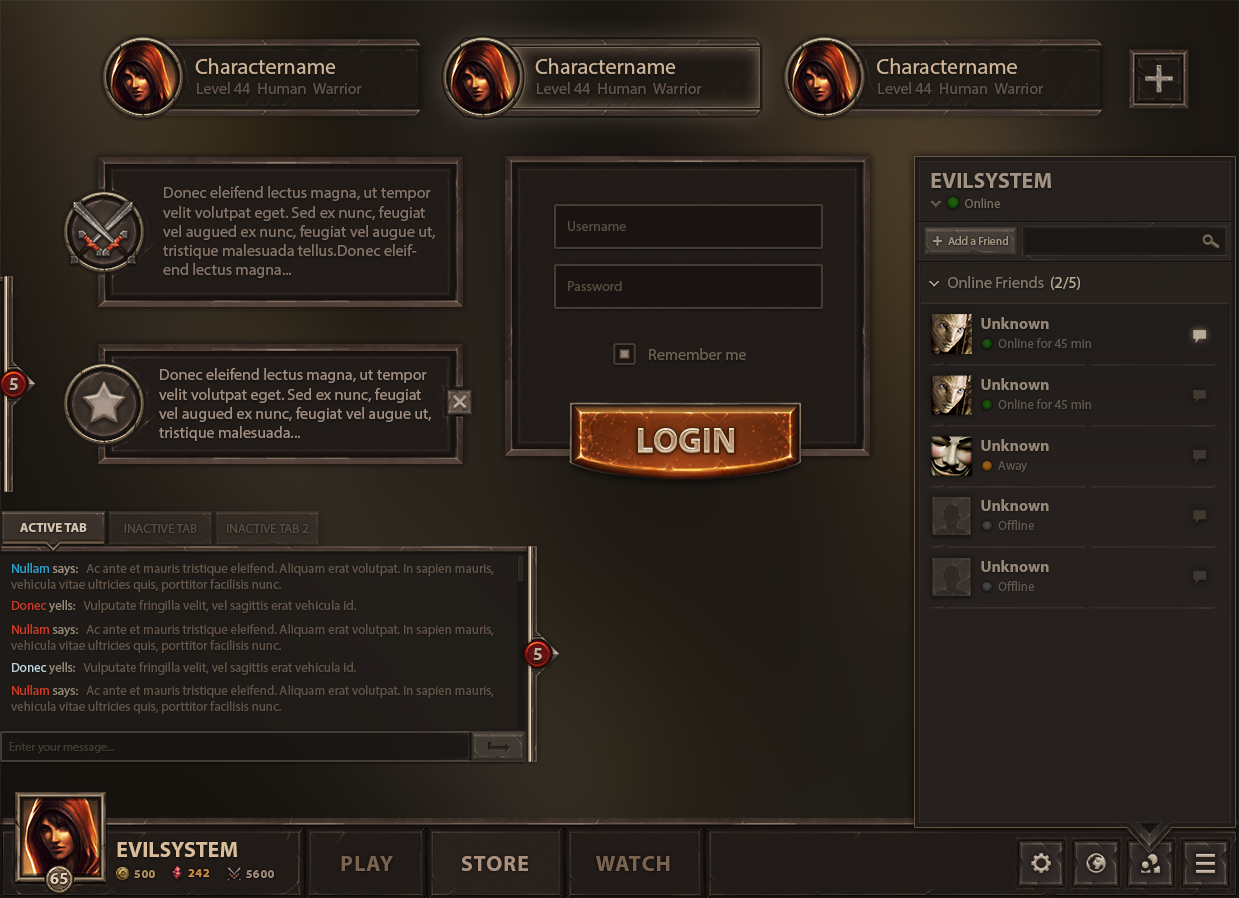
<style>
.page{position:relative;width:1239px;height:898px}
.page>*{position:absolute;margin:0}
.t1{font:22px "MyriadPro-Regular";color:#cfb598}
.t2{font:16px "MyriadPro-Regular";color:#615248}
.t3{font:22px "MyriadPro-Bold";color:#a29482;text-transform:uppercase}
.t4{font:16px "MyriadPro-Regular";color:#847468}
.t5{font:13px "MyriadPro-Regular";color:#756c61}
.t6{font:14px "MyriadPro-Regular";color:#554b3f}
.t7{font:11.5px "MyriadPro-Regular";color:#a39583}
.t8{font:16px "MyriadPro-Regular";color:#807669}
.t9{font:16px "MyriadPro-Regular";color:#bbac99}
.t10{font:16px "MyriadPro-Bold";color:#958877}
.t11{font:13px "MyriadPro-Regular";color:#5e574f}
.t12{font:16px "MyriadPro-Regular";color:#6b5f52}
.t13{font:16px "MyriadPro-Regular";color:#9f8e80}
.t14{font:17.5px "MyriadPro-Bold";color:#c2af9b}
.t15{font:35px "MyriadPro-Bold";text-transform:uppercase}
.t16{font:13px "MyriadPro-Bold";color:#d3c2af;text-transform:uppercase}
.t17{font:13px "MyriadPro-Regular";color:#594c43;text-transform:uppercase}
.t18{font:13px "MyriadPro-Regular";color:#605348}
.t19{font:13px "MyriadPro-Regular";color:#27a2ca}
.t20{font:13px "MyriadPro-Regular";color:#9e9181}
.t21{font:13px "MyriadPro-Regular";color:#ca3a27}
.t22{font:13px "MyriadPro-Regular";color:#958877}
.t23{font:13px "MyriadPro-Regular";color:#605247}
.t24{font:13px "MyriadPro-Regular";color:#c0d4db}
.t25{font:12px "MyriadPro-Regular";color:#413a33}
.t26{font:22px "MyriadPro-Bold";color:#dabd99;text-transform:uppercase}
.t27{font:22px "MyriadPro-Bold";letter-spacing:0.05em;color:#ae9481;text-transform:uppercase}
.t28{font:22px "MyriadPro-Bold";letter-spacing:0.05em;color:#7b6352;text-transform:uppercase}
.t29{font:12px "MyriadPro-Bold";letter-spacing:0.05em;color:#a88954}
.t30{font:12px "MyriadPro-Bold";letter-spacing:0.05em;color:#ca8636}
.t31{font:12px "MyriadPro-Bold";letter-spacing:0.05em;color:#9a8473}
.t32{font:16.5px "MyriadPro-Bold";color:#e4ceba}
</style>
<div class="page">
<p class="t1" style="left:195px;top:58px;width:141px;height:16px">Charactername</p>
<p class="t1" style="left:535px;top:58px;width:141px;height:16px">Charactername</p>
<p class="t1" style="left:877px;top:58px;width:140px;height:16px">Charactername</p>
<p class="t2" style="left:197px;top:82px;width:165px;height:12px">Level 44  Human  Warrior</p>
<p class="t2" style="left:537px;top:82px;width:165px;height:12px">Level 44  Human  Warrior</p>
<p class="t2" style="left:878px;top:82px;width:165px;height:12px">Level 44  Human  Warrior</p>
<p class="t3" style="left:931px;top:173px;width:120px;height:15px">Evilsystem</p>
<p class="t4" style="left:163px;top:186px;width:272px;height:92px">Donec eleifend lectus magna, ut tempor velit volutpat eget. Sed ex nunc, feugiat vel augued ex nunc, feugiat vel augue ut, tristique malesuada tellus.Donec eleifend lectus magna...</p>
<p class="t5" style="left:965px;top:198px;width:35px;height:10px">Online</p>
<p class="t6" style="left:568px;top:221px;width:58px;height:10px">Username</p>
<p class="t7" style="left:948px;top:236px;width:60px;height:9px">Add a Friend</p>
<p class="t6" style="left:568px;top:281px;width:54px;height:10px">Password</p>
<p class="t8" style="left:948px;top:276px;width:96px;height:12px">Online Friends</p>
<p class="t9" style="left:1051px;top:276px;width:29px;height:14px">(2/5)</p>
<p class="t10" style="left:981px;top:317px;width:68px;height:12px">Unknown</p>
<p class="t11" style="left:998px;top:338px;width:93px;height:10px">Online for 45 min</p>
<p class="t12" style="left:649px;top:348px;width:97px;height:12px">Remember me</p>
<p class="t13" style="left:159px;top:368px;width:272px;height:73px">Donec eleifend lectus magna, ut tempor velit volutpat eget. Sed ex nunc, feugiat vel augued ex nunc, feugiat vel augue ut, tristique malesuada...</p>
<p class="t14" style="left:9px;top:378px;width:9px;height:12px">5</p>
<p class="t10" style="left:981px;top:378px;width:68px;height:12px">Unknown</p>
<p class="t11" style="left:998px;top:399px;width:93px;height:10px">Online for 45 min</p>
<p class="t15" style="left:638px;top:429px;width:96px;height:24px">login</p>
<p class="t15" style="left:638px;top:428px;width:96px;height:24px">login</p>
<p class="t15" style="left:638px;top:428px;width:96px;height:24px">login</p>
<p class="t10" style="left:981px;top:439px;width:68px;height:12px">Unknown</p>
<p class="t11" style="left:998px;top:461px;width:29px;height:12px">Away</p>
<p class="t10" style="left:981px;top:499px;width:68px;height:12px">Unknown</p>
<p class="t11" style="left:998px;top:520px;width:36px;height:10px">Offline</p>
<p class="t16" style="left:20px;top:523px;width:67px;height:9px">active tab</p>
<p class="t17" style="left:124px;top:524px;width:73px;height:9px">inactive tab</p>
<p class="t17" style="left:227px;top:524px;width:82px;height:9px">inactive tab 2</p>
<p class="t18" style="left:11px;top:563px;width:483px;height:29px"><span class="t19">Nullam</span><span class="t20"> says:   </span>Ac ante et mauris tristique eleifend. Aliquam erat volutpat. In sapien mauris, vehicula vitae ultricies quis, porttitor facilisis nunc.</p>
<p class="t10" style="left:981px;top:560px;width:68px;height:12px">Unknown</p>
<p class="t11" style="left:998px;top:581px;width:36px;height:10px">Offline</p>
<p class="t18" style="left:12px;top:600px;width:344px;height:13px"><span class="t21">Donec</span><span class="t22"> yells:   </span>Vulputate fringilla velit, vel sagittis erat vehicula id.</p>
<p class="t23" style="left:11px;top:624px;width:483px;height:29px"><span class="t21">Nullam</span><span class="t22"> says:   </span>Ac ante et mauris tristique eleifend. Aliquam erat volutpat. In sapien mauris, vehicula vitae ultricies quis, porttitor facilisis nunc.</p>
<p class="t14" style="left:533px;top:648px;width:9px;height:12px">5</p>
<p class="t18" style="left:12px;top:662px;width:344px;height:13px"><span class="t24">Donec </span><span class="t22">yells:   </span>Vulputate fringilla velit, vel sagittis erat vehicula id.</p>
<p class="t23" style="left:11px;top:685px;width:483px;height:29px"><span class="t21">Nullam</span><span class="t22"> says:   </span>Ac ante et mauris tristique eleifend. Aliquam erat volutpat. In sapien mauris, vehicula vitae ultricies quis, porttitor facilisis nunc.</p>
<p class="t25" style="left:9px;top:742px;width:105px;height:12px">Enter your message...</p>
<p class="t26" style="left:117px;top:842px;width:120px;height:15px">Evilsystem</p>
<p class="t27" style="left:341px;top:856px;width:329px;height:15px"><span class="t28">play            </span>store<span class="t28">            watch</span></p>
<p class="t29" style="left:134px;top:870px;width:21px;height:8px">500</p>
<p class="t30" style="left:188px;top:869px;width:22px;height:8px">242</p>
<p class="t31" style="left:246px;top:870px;width:28px;height:8px">5600</p>
<p class="t32" style="left:50px;top:873px;width:18px;height:11px">65</p>
</div>
